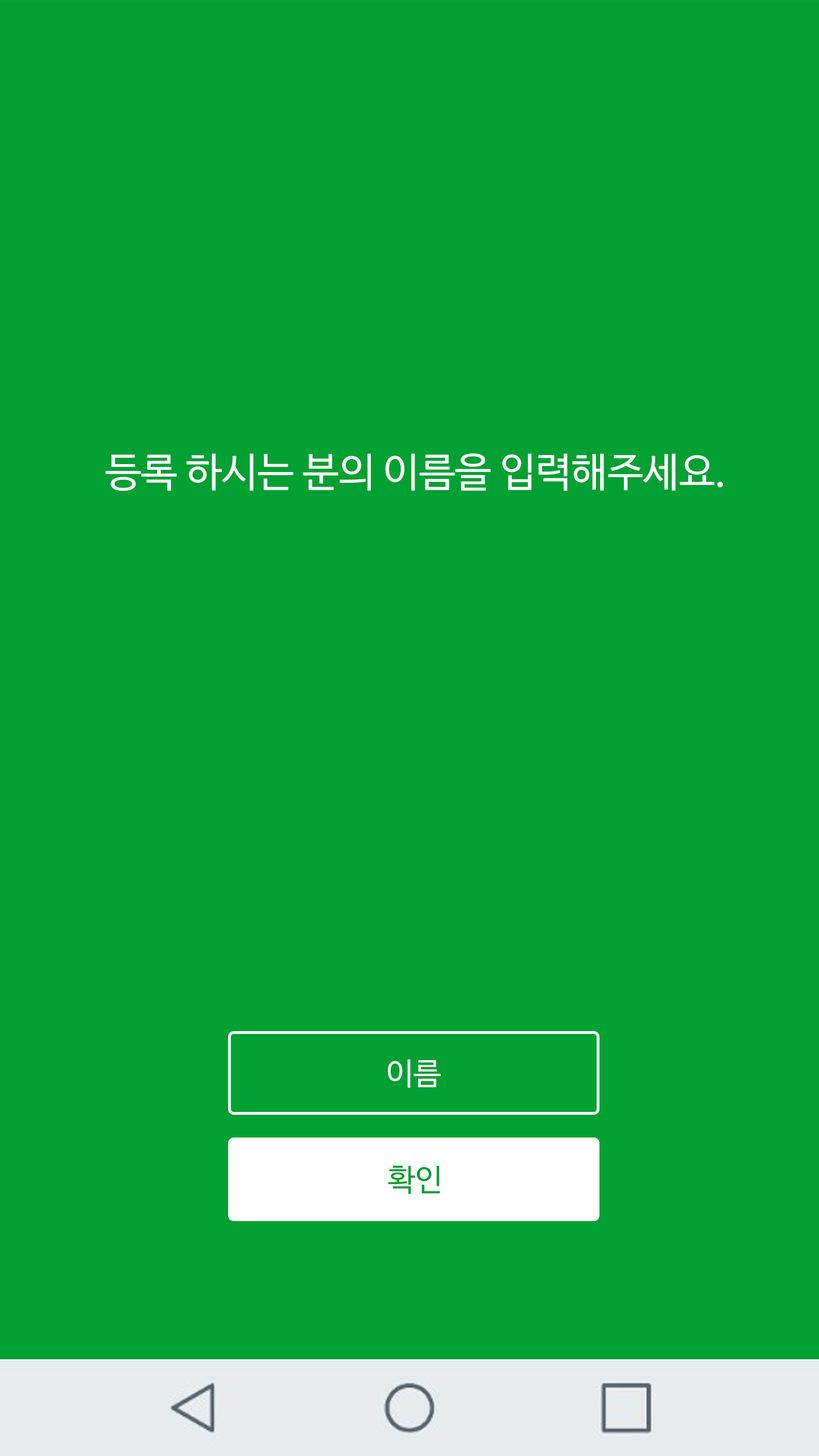
<style>
.page{position:relative;width:819px;height:1456px;background:#01a032}
.page>*{position:absolute;margin:0}
.t1{font:40.3px "NanumBarunGothicOTF";color:#ffffff}
.t2{font:30.8px "NanumBarunGothicOTF";color:#ffffff}
.t3{font:30.8px "NanumBarunGothicOTF";color:#01a032}
</style>
<div class="page">
<p class="t1" style="left:105px;top:453px;width:618px;height:38px">등록 하시는 분의 이름을 입력해주세요.</p>
<p class="t2" style="left:387px;top:1059px;width:54px;height:29px">이름</p>
<p class="t3" style="left:388px;top:1165px;width:52px;height:29px">확인</p>
</div>
